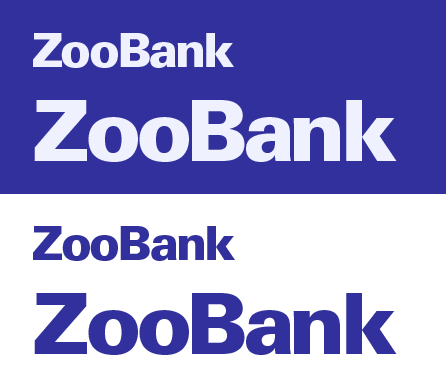
<style>
.page{position:relative;width:446px;height:387px;background:#31309c}
.page>*{position:absolute;margin:0}
.t1{font:47px "UniversLTStd-Black";letter-spacing:-0.05em;color:#eff1ff}
.t2{font:85px "UniversLTStd-Black";letter-spacing:-0.055em;color:#eff1ff}
.t3{font:47px "UniversLTStd-Black";letter-spacing:-0.05em;color:#31309c}
.t4{font:85px "UniversLTStd-Black";letter-spacing:-0.055em;color:#31309c}
</style>
<div class="page">
<p class="t1" style="left:33px;top:33px;width:201px;height:35px">ZooBank</p>
<p class="t2" style="left:34px;top:100px;width:363px;height:62px">ZooBank</p>
<p class="t3" style="left:33px;top:226px;width:202px;height:35px">ZooBank</p>
<p class="t4" style="left:34px;top:293px;width:363px;height:62px">ZooBank</p>
</div>
